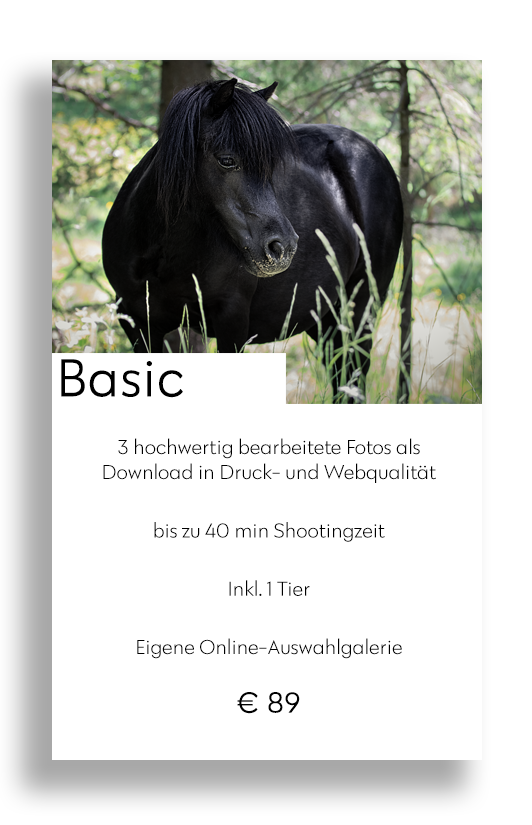
<style>
.page{position:relative;width:532px;height:825px;background:#ffffff}
.page>*{position:absolute;margin:0}
.t1{font:54.4px "Klik-Light";color:#000000;font-weight:bold}
.t2{font:20.8px/58.3px "Klik-Light";color:#000000}
.t3{font:20.8px/54.2px "Klik-Light";color:#000000}
.t4{font:20.8px "Klik-Light";color:#000000}
.t5{font:29.2px/58.3px "Klik-Light";color:#000000;font-weight:bold}
</style>
<div class="page">
<p class="t1" style="left:61px;top:359px;width:122px;height:39px">Basic</p>
<p class="t2" style="left:103px;top:438px;width:333px;height:276px;text-align:center"><span class="t3">3 hochwertig bearbeitete Fotos als<br></span><span class="t4">Download in Druck- und Webqualität<br></span>bis zu 40 min Shootingzeit<br>Inkl. 1 Tier<br>Eigene Online-Auswahlgalerie<br><span class="t5">€ 89</span></p>
</div>
